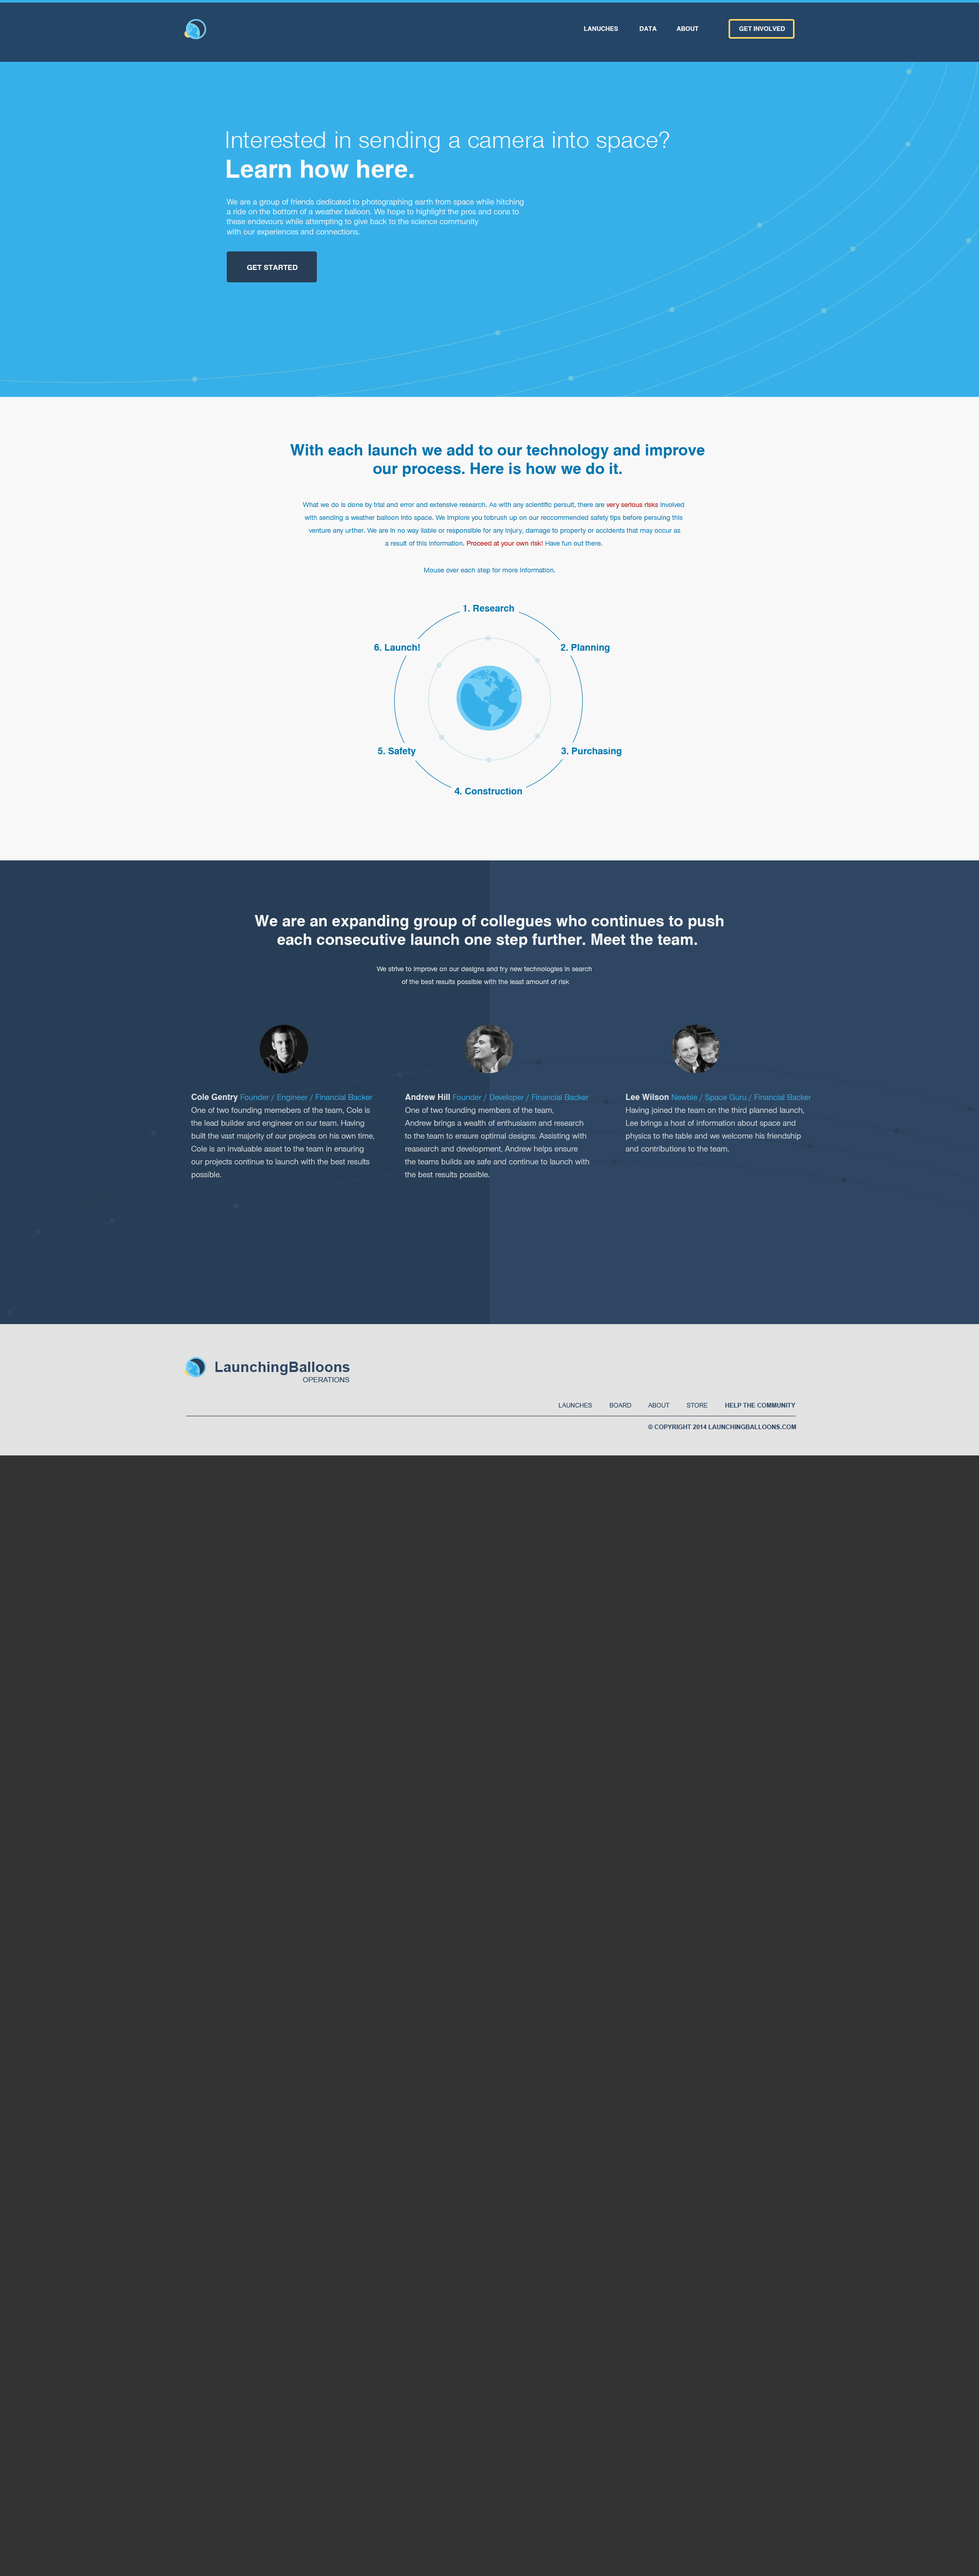
<style>
.page{position:relative;width:979px;height:2576px;background:#333333}
.page>*{position:absolute;margin:0}
.t1{font:6.2px "Sans";color:#f9f9f9}
.t2{font:24.7px "SansLight";color:#f9f9f9}
.t3{font:24.7px "Sans";color:#f9f9f9}
.t4{font:8.2px "SansLight";color:#f9f9f9}
.t5{font:7.2px "Sans";color:#f9f9f9}
.t6{font:15.5px "Sans";color:#0074ad}
.t7{font:7.2px/12.9px "SansLight";color:#0074ad}
.t8{font:7.2px/12.9px "SansLight";color:#ad0000}
.t9{font:7.2px "SansLight";color:#0074ad}
.t10{font:9.3px "Sans";color:#0074ad}
.t11{font:15.5px "Sans";color:#f8f8f8}
.t12{font:7.2px/12.9px "SansLight";color:#f8f8f8}
.t13{font:8.2px/12.9px "SansLight";color:#e3e6e9}
.t14{font:8.2px/12.9px "Sans";color:#e3e6e9}
.t15{font:8.2px/12.9px "SansLight";color:#37b0e9}
.t16{font:14.6px "Arial-BoldMT";color:#2e4662}
.t17{font:7.2px "ArialMT";color:#2e4662}
.t18{font:6.2px "ArialMT";color:#2e4662}
.t19{font:6.2px "Arial-BoldMT";color:#2e4662}
</style>
<div class="page">
<p class="t1" style="left:584px;top:26px;width:201px;height:5px">LANUCHES  DATA  ABOUT      GET INVOLVED</p>
<p class="t2" style="left:226px;top:131px;width:443px;height:21px">Interested in sending a camera into space?</p>
<p class="t3" style="left:227px;top:160px;width:187px;height:18px">Learn how here.</p>
<p class="t4" style="left:226px;top:199px;width:297px;height:37px">We are a group of friends dedicated to photographing earth from space while hitching<br>a ride on the bottom of a weather balloon. We hope to highlight the pros and cons to <br>these endevours while attempting to give back to the science community <br>with our experiences and connections.</p>
<p class="t5" style="left:247px;top:265px;width:51px;height:5px">GET STARTED</p>
<p class="t6" style="left:290px;top:444px;width:415px;height:33px;text-align:center">With each launch we add to our technology and improve <br>our process. Here is how we do it.</p>
<p class="t7" style="left:302px;top:502px;width:382px;height:45px;text-align:center">What we do is done by trial and error and extensive research. As with any scientific persuit, there are <span class="t8">very serious risks </span>involved <br>with sending a weather balloon into space. We implore you tobrush up on our reccommended safety tips before persuing this <br>venture any urther. We are in no way liable or responsible for any injury, damage to property or accidents that may occur as<br>a result of this information. <span class="t8">Proceed at your own risk! </span>Have fun out there.</p>
<p class="t9" style="left:424px;top:568px;width:131px;height:6px">Mouse over each step for more information.</p>
<p class="t10" style="left:463px;top:605px;width:51px;height:7px">1. Research</p>
<p class="t10" style="left:374px;top:644px;width:46px;height:7px">6. Launch!</p>
<p class="t10" style="left:561px;top:644px;width:48px;height:9px">2. Planning</p>
<p class="t10" style="left:378px;top:748px;width:38px;height:8px">5. Safety</p>
<p class="t10" style="left:561px;top:748px;width:60px;height:8px">3. Purchasing</p>
<p class="t10" style="left:454px;top:788px;width:68px;height:7px">4. Construction</p>
<p class="t11" style="left:255px;top:915px;width:468px;height:33px;text-align:center">We are an expanding group of collegues who continues to push<br>each consecutive launch one step further. Meet the team.</p>
<p class="t12" style="left:377px;top:967px;width:214px;height:19px;text-align:center">We strive to improve on our designs and try new technologies in search <br>of the best results possible with the least amount of risk</p>
<p class="t13" style="left:191px;top:1094px;width:183px;height:85px"><span class="t14">Cole Gentry </span><span class="t15">Founder / Engineer / Financial Backer<br></span>One of two founding memebers of the team, Cole is<br>the lead builder and engineer on our team. Having<br>built the vast majority of our projects on his own time, <br>Cole is an invaluable asset to the team in ensuring<br>our projects continue to launch with the best results<br>possible.</p>
<p class="t13" style="left:404px;top:1094px;width:185px;height:85px"><span class="t14">Andrew Hill </span><span class="t15">Founder / Developer / Financial Backer<br></span>One of two founding members of the team, <br>Andrew brings a wealth of enthusiasm and research <br>to the team to ensure optimal designs. Assisting with <br>reasearch and development, Andrew helps ensure <br>the teams builds are safe and continue to launch with <br>the best results possible.</p>
<p class="t13" style="left:625px;top:1094px;width:186px;height:57px"><span class="t14">Lee Wilson </span><span class="t15">Newbie / Space Guru / Financial Backer<br></span>Having joined the team on the third planned launch, <br>Lee brings a host of information about space and<br>physics to the table and we welcome his friendship <br>and contributions to the team.</p>
<p class="t16" style="left:215px;top:1362px;width:135px;height:13px">LaunchingBalloons</p>
<p class="t17" style="left:303px;top:1377px;width:46px;height:5px">OPERATIONS</p>
<p class="t18" style="left:558px;top:1403px;width:237px;height:5px">LAUNCHES          BOARD          ABOUT          STORE          <span class="t19">HELP THE COMMUNITY</span></p>
<p class="t19" style="left:648px;top:1425px;width:148px;height:4px">© COPYRIGHT 2014 LAUNCHINGBALLOONS.COM</p>
</div>
